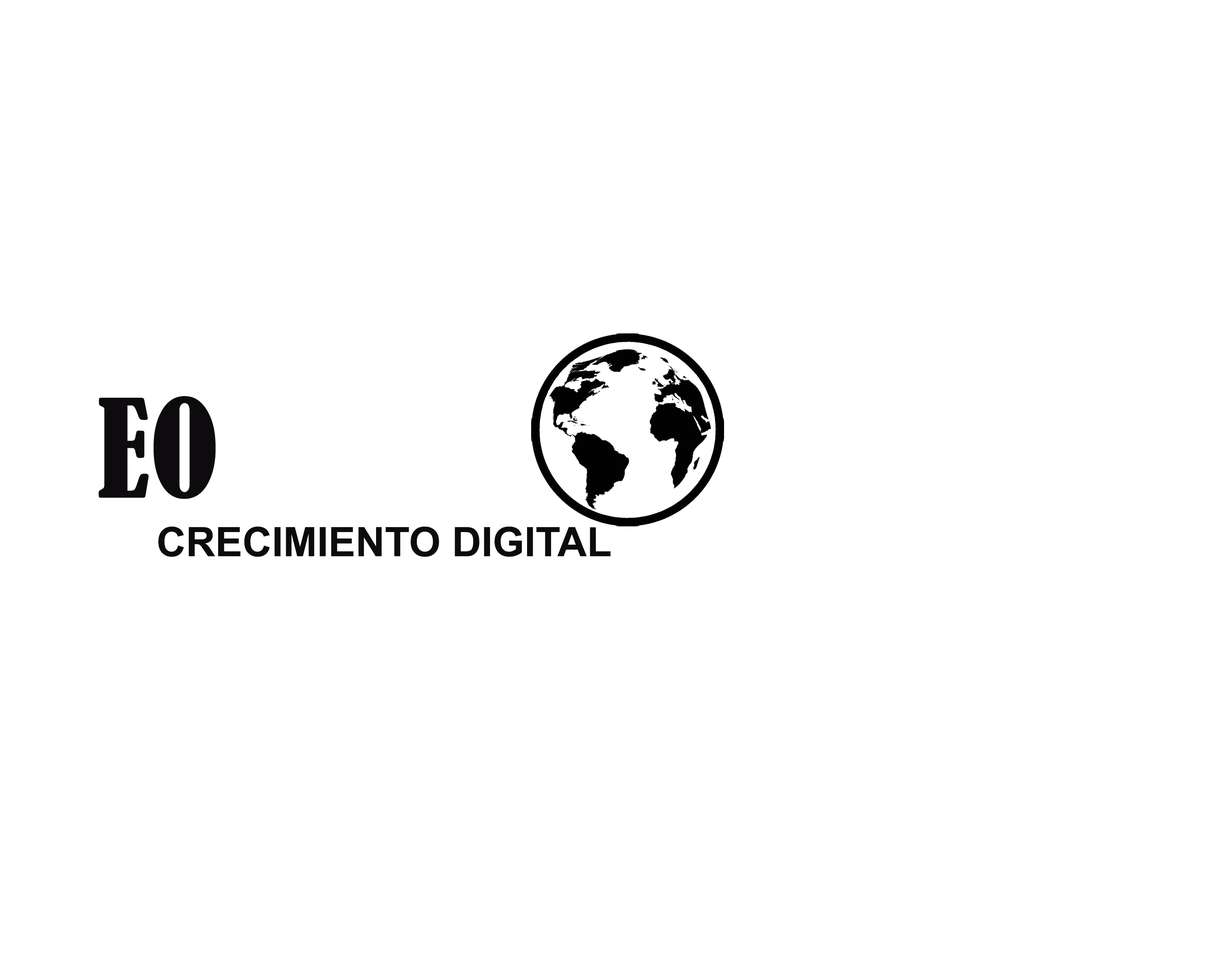
<style>
.page{position:relative;width:1221px;height:977px;background:#ffffff}
.page>*{position:absolute;margin:0}
.t1{font:126.8px "BernardMT-Condensed";color:#0d0b0d}
.t2{font:40.7px "Arial-BoldMT";color:#0d0b0d}
</style>
<div class="page">
<p class="t1" style="left:98px;top:396px;width:118px;height:103px">EO</p>
<p class="t2" style="left:158px;top:526px;width:452px;height:31px">CRECIMIENTO DIGITAL</p>
</div>
